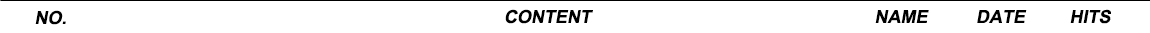
<style>
.page{position:relative;width:1150px;height:33px;background:#ffffff}
.page>*{position:absolute;margin:0}
.t1{font:18px "Arial-BoldMT";color:#000000;font-style:italic}
</style>
<div class="page">
<p class="t1" style="left:35px;top:10px;width:31px;height:15px">NO.</p>
<p class="t1" style="left:505px;top:9px;width:88px;height:15px">CONTENT</p>
<p class="t1" style="left:875px;top:10px;width:54px;height:13px">NAME</p>
<p class="t1" style="left:977px;top:10px;width:50px;height:13px">DATE</p>
<p class="t1" style="left:1070px;top:9px;width:41px;height:15px">HITS</p>
</div>
